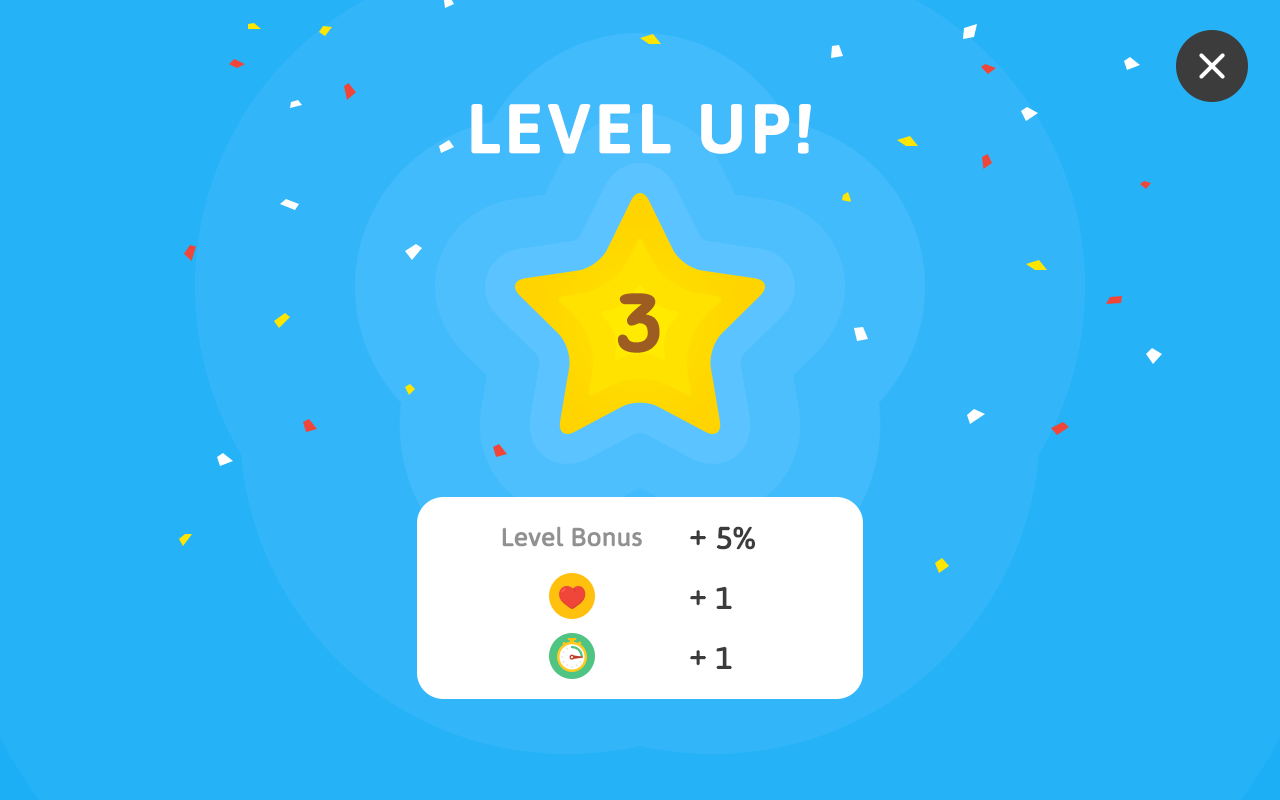
<style>
.page{position:relative;width:1280px;height:800px;background:#25b2f7}
.page>*{position:absolute;margin:0}
.t1{font:70px "Asap-Bold";letter-spacing:0.06em;color:#ffffff;text-transform:uppercase}
.t2{font:80px "Sniglet-Regular";letter-spacing:0.02em;color:#9d5d22;font-weight:bold}
.t3{font:24.9px "Asap-Regular";letter-spacing:-0.01em;color:#919191;font-weight:bold;scale:1.05 1}
.t4{font:30.2px/60px "Asap-Regular";letter-spacing:-0.01em;color:#3c3c3c;font-weight:bold;scale:1.05 1}
</style>
<div class="page">
<p class="t1" style="left:471px;top:104px;width:340px;height:50px">LEVEL UP!</p>
<p class="t2" style="left:618px;top:293px;width:42px;height:60px">3</p>
<p class="t3" style="left:502px;top:526px;width:140px;height:21px">Level Bonus</p>
<p class="t4" style="left:690px;top:526px;width:65px;height:143px">+ 5%<br>+ 1<br>+ 1</p>
</div>
